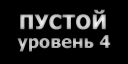
<style>
.page{position:relative;width:128px;height:64px;background:#000000}
.page>*{position:absolute;margin:0}
.t1{font:20px "Tahoma-Bold";color:#c7c7c7;font-weight:bold}
.t2{font:18px "Tahoma-Bold";color:#b7b7b7}
</style>
<div class="page">
<p class="t1" style="left:20px;top:9px;width:86px;height:21px">ПУСТОЙ</p>
<p class="t2" style="left:17px;top:35px;width:94px;height:17px">уровень 4</p>
</div>
